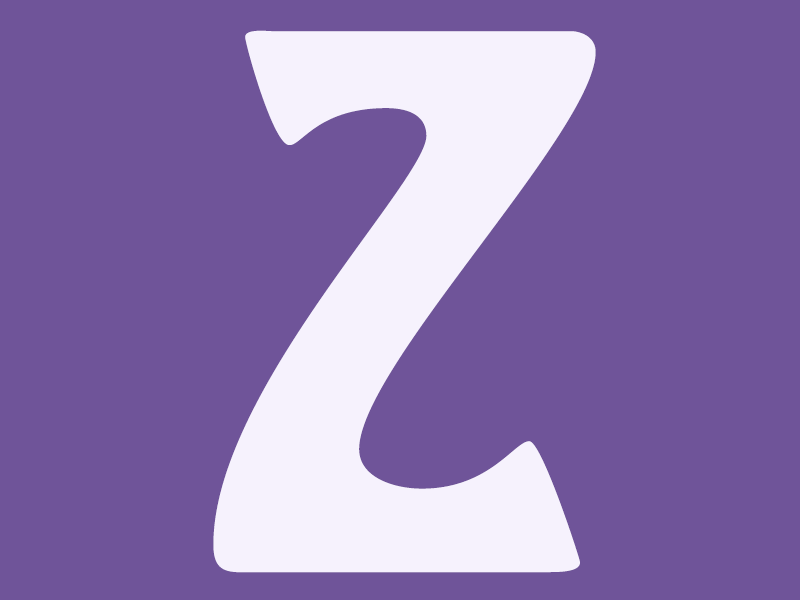
<style>
.page{position:relative;width:800px;height:600px;background:#6f5499}
.page>*{position:absolute;margin:0}
.t1{font:650px "HoboStd";letter-spacing:-0.025em;color:#f6f2fd}
</style>
<div class="page">
<p class="t1" style="left:213px;top:30px;width:383px;height:543px">Z</p>
</div>
